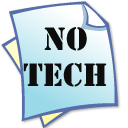
<style>
.page{position:relative;width:128px;height:128px;background:#ffffff}
.page>*{position:absolute;margin:0}
.t1{font:30px "StencilStd";color:#0e0d0d}
</style>
<div class="page">
<p class="t1" style="left:23px;top:27px;width:84px;height:60px;text-align:center">No<br>tech</p>
</div>
